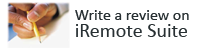
<style>
.page{position:relative;width:198px;height:50px;background:#ffffff}
.page>*{position:absolute;margin:0}
.t1{font:16px/17px "Calibri";color:#283033}
.t2{font:20px/17px "Calibri";color:#283033}
</style>
<div class="page">
<p class="t1" style="left:75px;top:10px;width:114px;height:27px">Write a review on <br><span class="t2">iRemote Suite</span></p>
</div>
